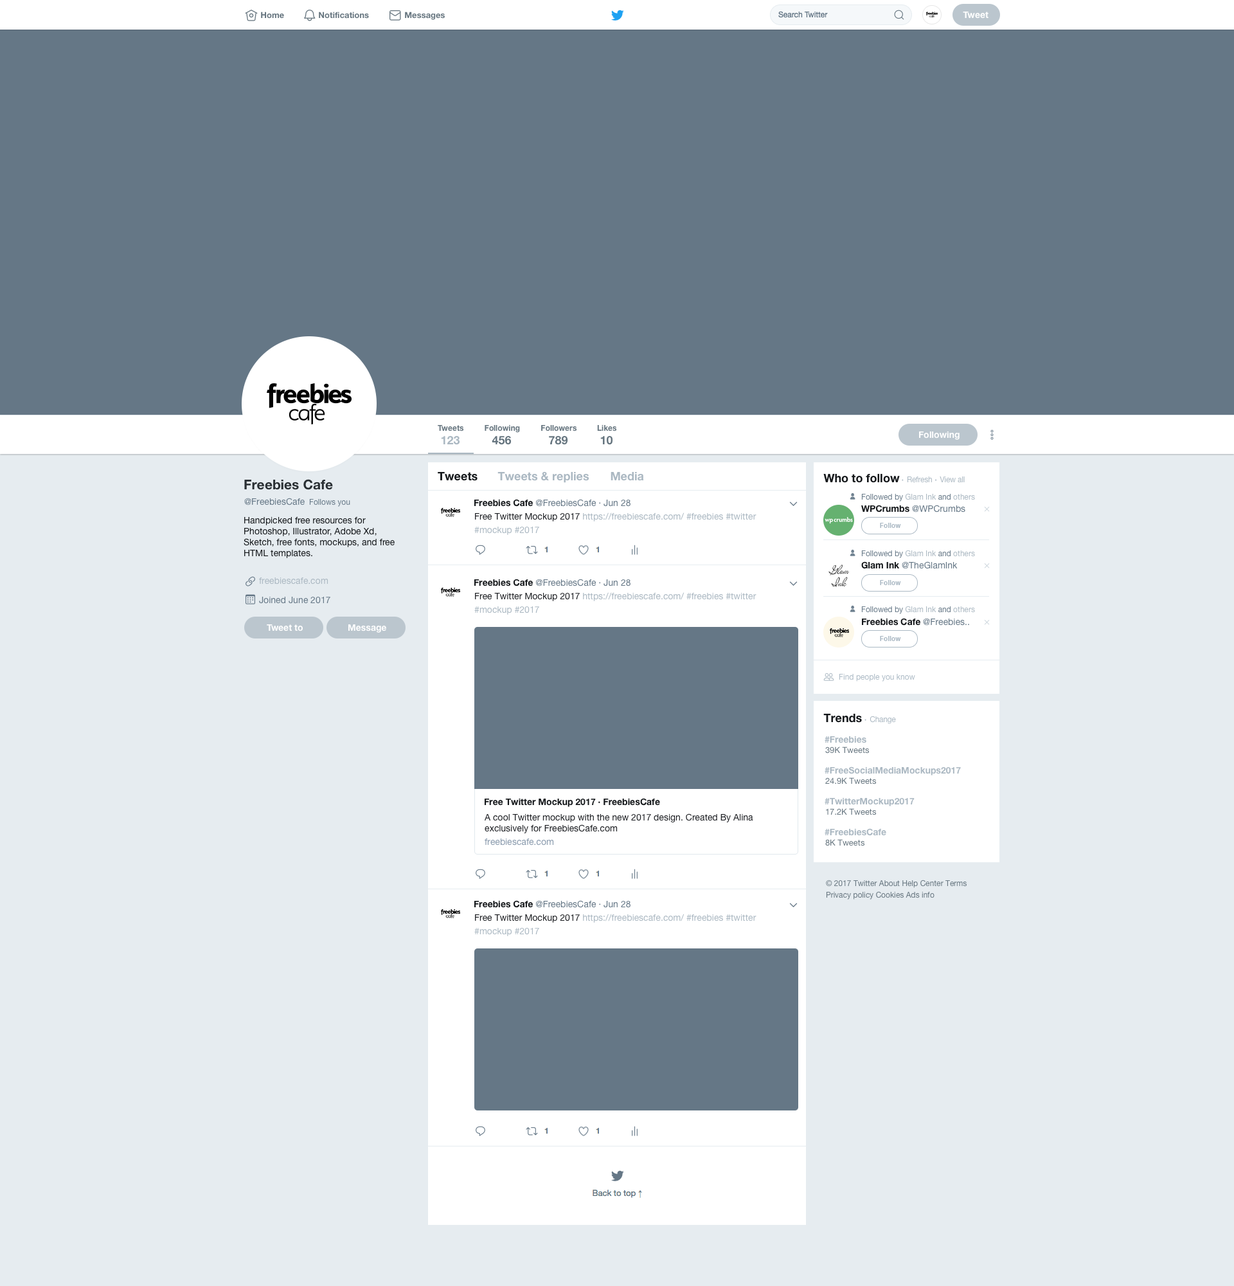
<style>
.page{position:relative;width:1234px;height:1286px;background:#e6ecf0}
.page>*{position:absolute;margin:0}
.t1{font:8.4px "HelveticaNeue-Bold";letter-spacing:0.001em;color:#66757f}
.t2{font:9px "HelveticaNeue-Bold";letter-spacing:0.001em;color:#ffffff}
.t3{font:7.7px "HelveticaNeue-Bold";letter-spacing:0.001em;color:#66757f}
.t4{font:11.6px "HelveticaNeue-Bold";letter-spacing:0.001em;color:#abb8c2}
.t5{font:11.6px "HelveticaNeue-Bold";letter-spacing:0.001em;color:#66757f}
.t6{font:11.6px "HelveticaNeue-Bold";color:#14171a}
.t7{font:11.6px "HelveticaNeue-Bold";color:#abb8c2}
.t8{font:6.4px "HelveticaNeue";letter-spacing:-0.02em;color:#abb8c2}
.t9{font:7.7px "HelveticaNeue";letter-spacing:-0.02em;color:#abb8c2}
.t10{font:13.5px "HelveticaNeue-Bold";color:#292f33}
.t11{font:9px "HelveticaNeue";letter-spacing:0.001em;color:#657786}
.t12{font:7.7px "HelveticaNeue";letter-spacing:0.001em;color:#657786}
.t13{font:7.7px "HelveticaNeue";color:#657786}
.t14{font:7.7px "HelveticaNeue";color:#abb8c2}
.t15{font:9px/9px "HelveticaNeue";color:#abb8c2}
.t16{font:9px/9px "HelveticaNeue-Bold";color:#14171a}
.t17{font:9px/9px "HelveticaNeue";color:#657786}
.t18{font:9px/9px "HelveticaNeue";color:#1c1e22}
.t19{font:9px "HelveticaNeue";color:#657786}
.t20{font:9px "HelveticaNeue-Bold";color:#14171a}
.t21{font:9px/10.9px "HelveticaNeue";letter-spacing:0.001em;color:#14171a}
.t22{font:6.9px "HelveticaNeue-Bold";letter-spacing:0.001em;color:#abb9c4}
.t23{font:9px/13.5px "HelveticaNeue";letter-spacing:0.001em;color:#abb8c2}
.t24{font:9px/13.5px "HelveticaNeue";letter-spacing:0.001em;color:#657786}
.t25{font:7.7px "HelveticaNeue";color:#abb9c4}
.t26{font:9px/10.3px "HelveticaNeue-Bold";color:#abb8c2}
.t27{font:8.4px/10.3px "HelveticaNeue";color:#66757f}
.t28{font:9px "HelveticaNeue";color:#1c1e22}
.t29{font:9px/9px "HelveticaNeue";color:#8899ac}
.t30{font:7.7px/11.6px "HelveticaNeue";color:#66757f}
</style>
<div class="page">
<p class="t1" style="left:261px;top:12px;width:23px;height:7px">Home</p>
<p class="t1" style="left:319px;top:12px;width:50px;height:7px">Notifications</p>
<p class="t1" style="left:405px;top:12px;width:40px;height:8px">Messages</p>
<p class="t2" style="left:963px;top:12px;width:26px;height:7px">Tweet</p>
<p class="t3" style="left:438px;top:425px;width:26px;height:6px">Tweets</p>
<p class="t3" style="left:485px;top:425px;width:35px;height:8px">Following</p>
<p class="t3" style="left:541px;top:425px;width:36px;height:6px">Followers</p>
<p class="t3" style="left:597px;top:425px;width:19px;height:6px">Likes</p>
<p class="t4" style="left:441px;top:436px;width:19px;height:9px">123</p>
<p class="t5" style="left:492px;top:436px;width:20px;height:9px">456</p>
<p class="t5" style="left:549px;top:436px;width:19px;height:9px">789</p>
<p class="t5" style="left:600px;top:436px;width:13px;height:9px">10</p>
<p class="t2" style="left:919px;top:431px;width:41px;height:9px">Following</p>
<p class="t6" style="left:438px;top:472px;width:40px;height:9px">Tweets</p>
<p class="t7" style="left:498px;top:471px;width:92px;height:12px">Tweets &amp; replies</p>
<p class="t7" style="left:611px;top:472px;width:33px;height:9px">Media</p>
<p class="t6" style="left:824px;top:474px;width:141px;height:9px">Who to follow <span class="t8">•  </span><span class="t9">Refresh </span><span class="t8">•  </span><span class="t9">View all</span></p>
<p class="t10" style="left:244px;top:479px;width:89px;height:11px">Freebies Cafe</p>
<p class="t11" style="left:244px;top:498px;width:106px;height:9px">@FreebiesCafe  <span class="t12">Follows you</span></p>
<p class="t13" style="left:861px;top:493px;width:114px;height:8px">Followed by <span class="t14">Glam Ink</span> and <span class="t14">others</span></p>
<p class="t15" style="left:474px;top:499px;width:283px;height:36px"><span class="t16">Freebies Cafe </span><span class="t17">@FreebiesCafe · Jun 28<br></span><span class="t18">Free Twitter Mockup 2017 </span>https://freebiescafe.com/ #freebies #twitter<br>#mockup #2017</p>
<p class="t19" style="left:861px;top:505px;width:105px;height:7px"><span class="t20">WPCrumbs </span>@WPCrumbs</p>
<p class="t21" style="left:244px;top:516px;width:151px;height:42px">Handpicked free resources for Photoshop, Illustrator, Adobe Xd, Sketch, free fonts, mockups, and free HTML templates.</p>
<p class="t22" style="left:880px;top:523px;width:21px;height:5px">Follow</p>
<p class="t13" style="left:861px;top:550px;width:114px;height:8px">Followed by <span class="t14">Glam Ink</span> and <span class="t14">others</span></p>
<p class="t19" style="left:861px;top:561px;width:97px;height:8px"><span class="t20">Glam Ink </span>@TheGlamInk</p>
<p class="t23" style="left:259px;top:577px;width:71px;height:27px">freebiescafe.com<br><span class="t24">Joined June 2017</span></p>
<p class="t15" style="left:474px;top:579px;width:283px;height:36px"><span class="t16">Freebies Cafe </span><span class="t17">@FreebiesCafe · Jun 28<br></span><span class="t18">Free Twitter Mockup 2017 </span>https://freebiescafe.com/ #freebies #twitter<br>#mockup #2017</p>
<p class="t22" style="left:880px;top:580px;width:21px;height:5px">Follow</p>
<p class="t13" style="left:861px;top:606px;width:114px;height:8px">Followed by <span class="t14">Glam Ink</span> and <span class="t14">others</span></p>
<p class="t20" style="left:862px;top:618px;width:107px;height:8px">Freebies Cafe <span class="t19">@Freebies..</span></p>
<p class="t2" style="left:267px;top:624px;width:36px;height:7px">Tweet to</p>
<p class="t2" style="left:348px;top:624px;width:38px;height:9px">Message</p>
<p class="t22" style="left:880px;top:636px;width:21px;height:5px">Follow</p>
<p class="t25" style="left:839px;top:674px;width:76px;height:7px">Find people you know</p>
<p class="t6" style="left:824px;top:714px;width:72px;height:10px">Trends <span class="t8">•  </span><span class="t9">Change</span></p>
<p class="t26" style="left:825px;top:736px;width:136px;height:110px">#Freebies<br><span class="t27">39K Tweets<br><br></span>#FreeSocialMediaMockups2017<br><span class="t27">24.9K Tweets<br><br></span>#TwitterMockup2017<br><span class="t27">17.2K Tweets<br><br></span>#FreebiesCafe<br><span class="t27">8K Tweets</span></p>
<p class="t28" style="left:485px;top:798px;width:268px;height:47px"><span class="t20">Free Twitter Mockup 2017 · FreebiesCafe<br></span>A cool Twitter mockup with the new 2017 design. Created By Alina exclusively for FreebiesCafe.com<br><span class="t29">freebiescafe.com</span></p>
<p class="t30" style="left:826px;top:879px;width:141px;height:20px">© 2017 Twitter About Help Center Terms Privacy policy Cookies Ads info</p>
<p class="t15" style="left:474px;top:900px;width:283px;height:36px"><span class="t16">Freebies Cafe </span><span class="t17">@FreebiesCafe · Jun 28<br></span><span class="t18">Free Twitter Mockup 2017 </span>https://freebiescafe.com/ #freebies #twitter<br>#mockup #2017</p>
</div>
